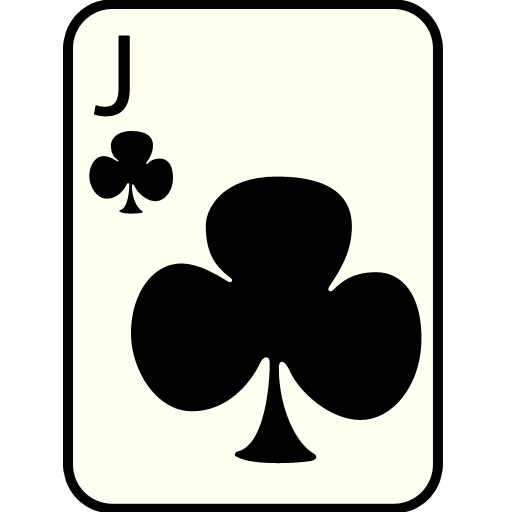
<style>
.page{position:relative;width:512px;height:512px;background:#fffff2}
.page>*{position:absolute;margin:0}
.t1{font:200px "MyriadPro-Regular";letter-spacing:-0.05em;color:#000000;font-variant:small-caps;font-weight:bold}
</style>
<div class="page">
<p class="t1" style="left:94px;top:35px;width:36px;height:82px">J</p>
</div>
